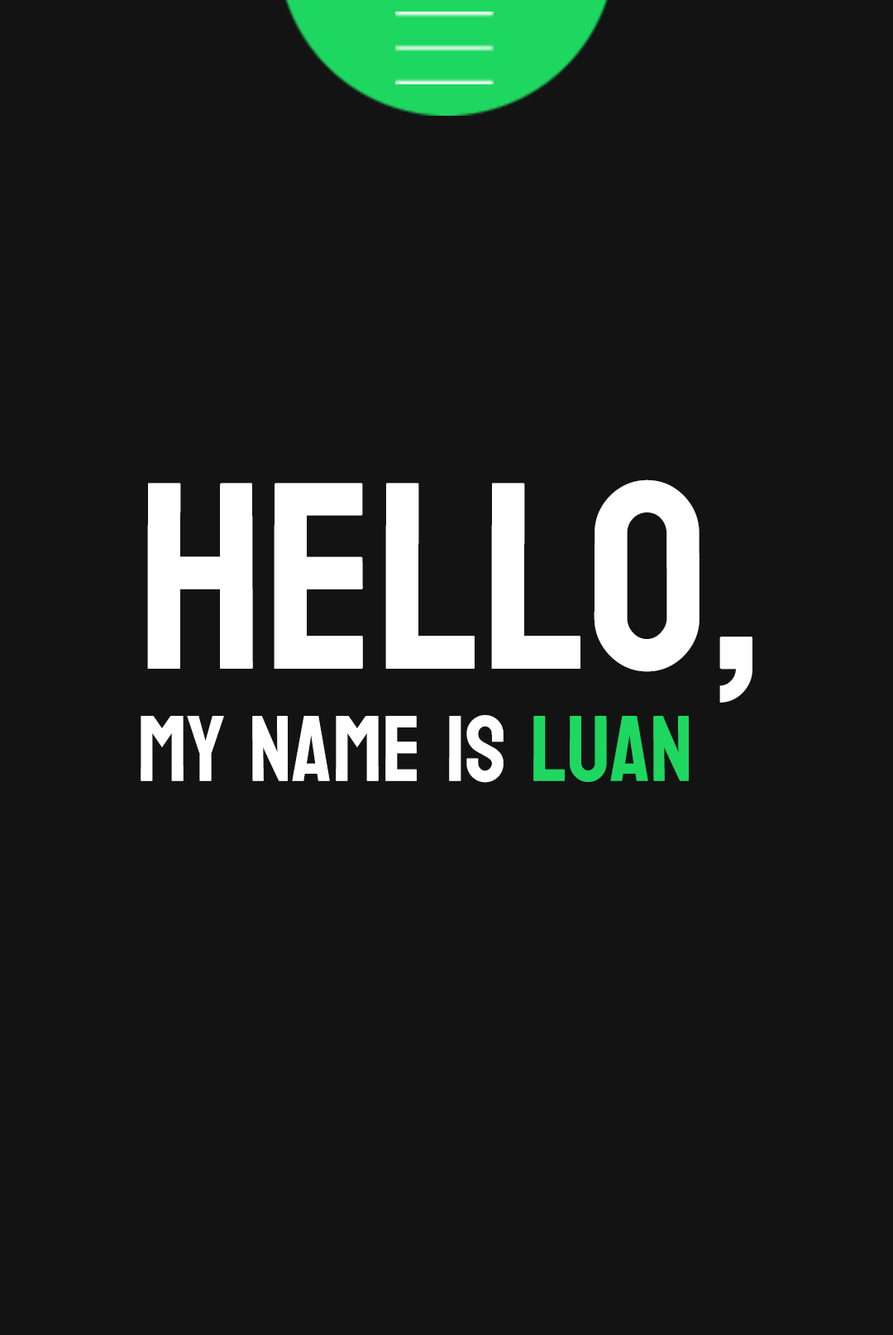
<style>
.page{position:relative;width:893px;height:1335px;background:#131313}
.page>*{position:absolute;margin:0}
.t1{font:93.4px "Koulen-Regular";color:#ffffff}
.t2{font:266.7px "Koulen-Regular";color:#ffffff}
.t3{font:93.4px "Koulen-Regular";color:#1ed760}
</style>
<div class="page">
<p class="t1" style="left:141px;top:480px;width:611px;height:303px"><span class="t2">hello,<br></span>mY name is <span class="t3">LUan</span></p>
</div>
